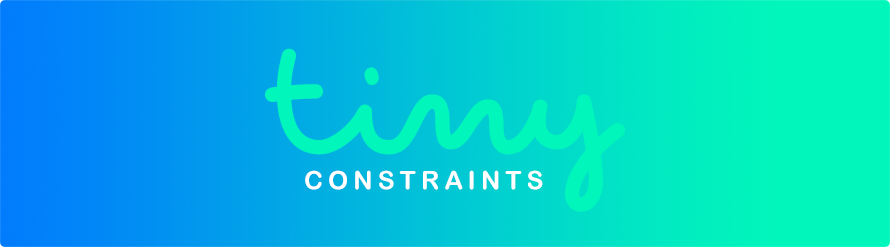
<style>
.page{position:relative;width:890px;height:247px}
.page>*{position:absolute;margin:0}
.t1{font:168.8px "Pecita";color:#01f6bb}
.t2{font:25.6px "ArialRoundedMTBold";letter-spacing:0.2em;color:#ffffff;text-transform:uppercase}
</style>
<div class="page">
<p class="t1" style="left:267px;top:50px;width:356px;height:160px">tiny</p>
<p class="t2" style="left:305px;top:170px;width:238px;height:20px">constraints</p>
</div>
